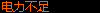
<style>
.page{position:relative;width:100px;height:13px;background:#000000}
.page>*{position:absolute;margin:0}
.t1{font:12px "MicrosoftYaHei";color:#ff5f00}
</style>
<div class="page">
<p class="t1" style="left:2px;top:1px;width:47px;height:11px">电力不足</p>
</div>
